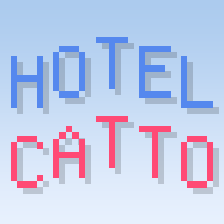
<style>
.page{position:relative;width:224px;height:224px}
.page>*{position:absolute;margin:0}
.t1{font:72px "DepartureMono-Regular";color:#5588ee}
.t2{font:72px "DepartureMono-Regular";color:#ff4a75}
</style>
<div class="page">
<p class="t1" style="left:96px;top:37px;width:32px;height:52px">T</p>
<p class="t1" style="left:53px;top:46px;width:32px;height:52px">O</p>
<p class="t1" style="left:139px;top:46px;width:32px;height:52px">E</p>
<p class="t1" style="left:11px;top:56px;width:32px;height:52px">H</p>
<p class="t1" style="left:181px;top:56px;width:32px;height:52px">L</p>
<p class="t2" style="left:53px;top:126px;width:32px;height:52px">A</p>
<p class="t2" style="left:96px;top:116px;width:32px;height:52px">T</p>
<p class="t2" style="left:139px;top:126px;width:32px;height:52px">T</p>
<p class="t2" style="left:11px;top:136px;width:32px;height:52px">C</p>
<p class="t2" style="left:181px;top:136px;width:32px;height:52px">O</p>
</div>
